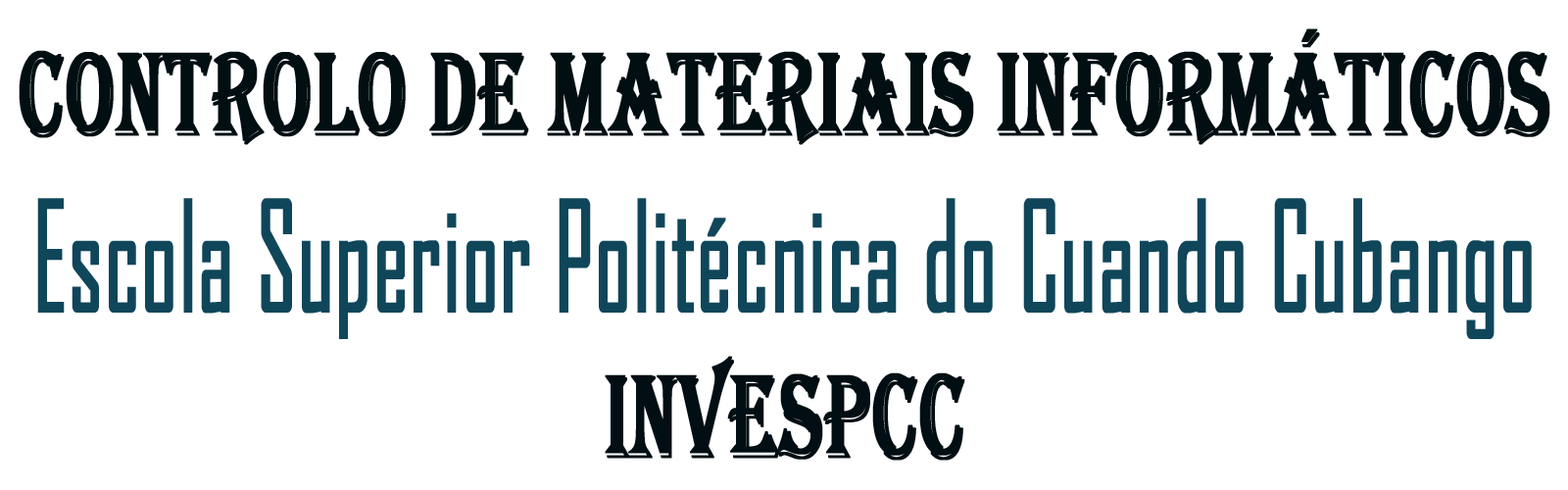
<style>
.page{position:relative;width:1568px;height:490px;background:#ffffff}
.page>*{position:absolute;margin:0}
.t1{font:147px "AgencyFB-Reg";color:#10465a;font-weight:bold;scale:0.63 1}
.t2{font:122.3px "Algerian";color:#010e12;font-weight:bold;scale:0.63 1}
.t3{font:122.3px "Algerian";color:#010e13;font-weight:bold;scale:0.63 1}
</style>
<div class="page">
<p class="t1" style="left:19px;top:28px;width:1531px;height:433px;text-align:center"><span class="t2">CONTROLO DE MATERIAIS INFORMÁTICOS <br></span>Escola Superior Politécnica do Cuando Cubango<br><span class="t3">invESPCC</span></p>
</div>
